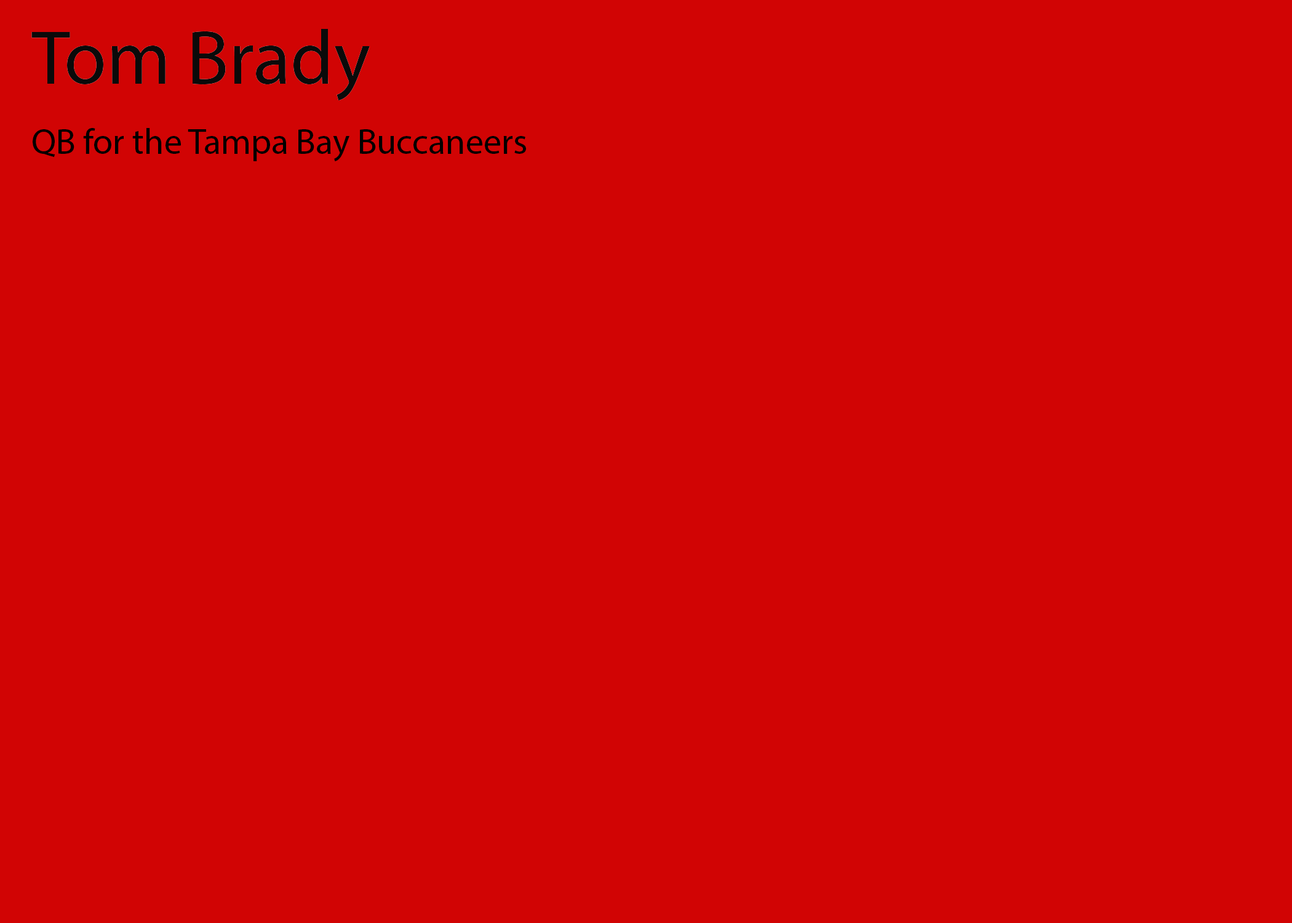
<style>
.page{position:relative;width:1292px;height:923px;background:#d10404}
.page>*{position:absolute;margin:0}
.t1{font:35.9px "MyriadPro-Regular";color:#000000}
</style>
<div class="page">
<p class="t1" style="left:33px;top:128px;width:493px;height:34px">QB for the Tampa Bay Buccaneers</p>
</div>
